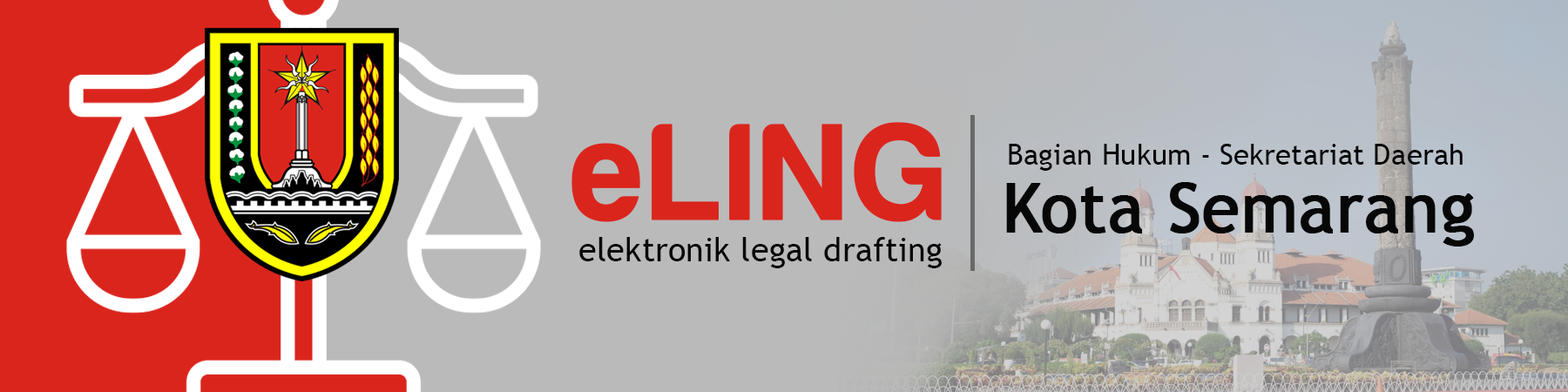
<style>
.page{position:relative;width:1568px;height:392px;background:#bababa}
.page>*{position:absolute;margin:0}
.t1{font:140px "HarabaraMaisBold-HarabaraMaisBold";color:#da251d;font-weight:bold}
.t2{font:29.1px "TrebuchetMS";color:#070707}
.t3{font:67.7px "TrebuchetMS";color:#070707;font-weight:bold}
.t4{font:33.5px "TrebuchetMS";color:#070707}
</style>
<div class="page">
<p class="t1" style="left:571px;top:122px;width:371px;height:100px">eLING</p>
<p class="t2" style="left:1009px;top:144px;width:454px;height:27px">Bagian Hukum - Sekretariat Daerah</p>
<p class="t3" style="left:1006px;top:182px;width:468px;height:65px">Kota Semarang</p>
<p class="t4" style="left:579px;top:237px;width:363px;height:31px">elektronik legal drafting</p>
</div>
